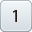
<style>
.page{position:relative;width:32px;height:32px}
.page>*{position:absolute;margin:0}
.t1{font:18px "MyriadPro-Regular";color:#241b1b}
</style>
<div class="page">
<p class="t1" style="left:13px;top:10px;width:4px;height:12px">1</p>
</div>
